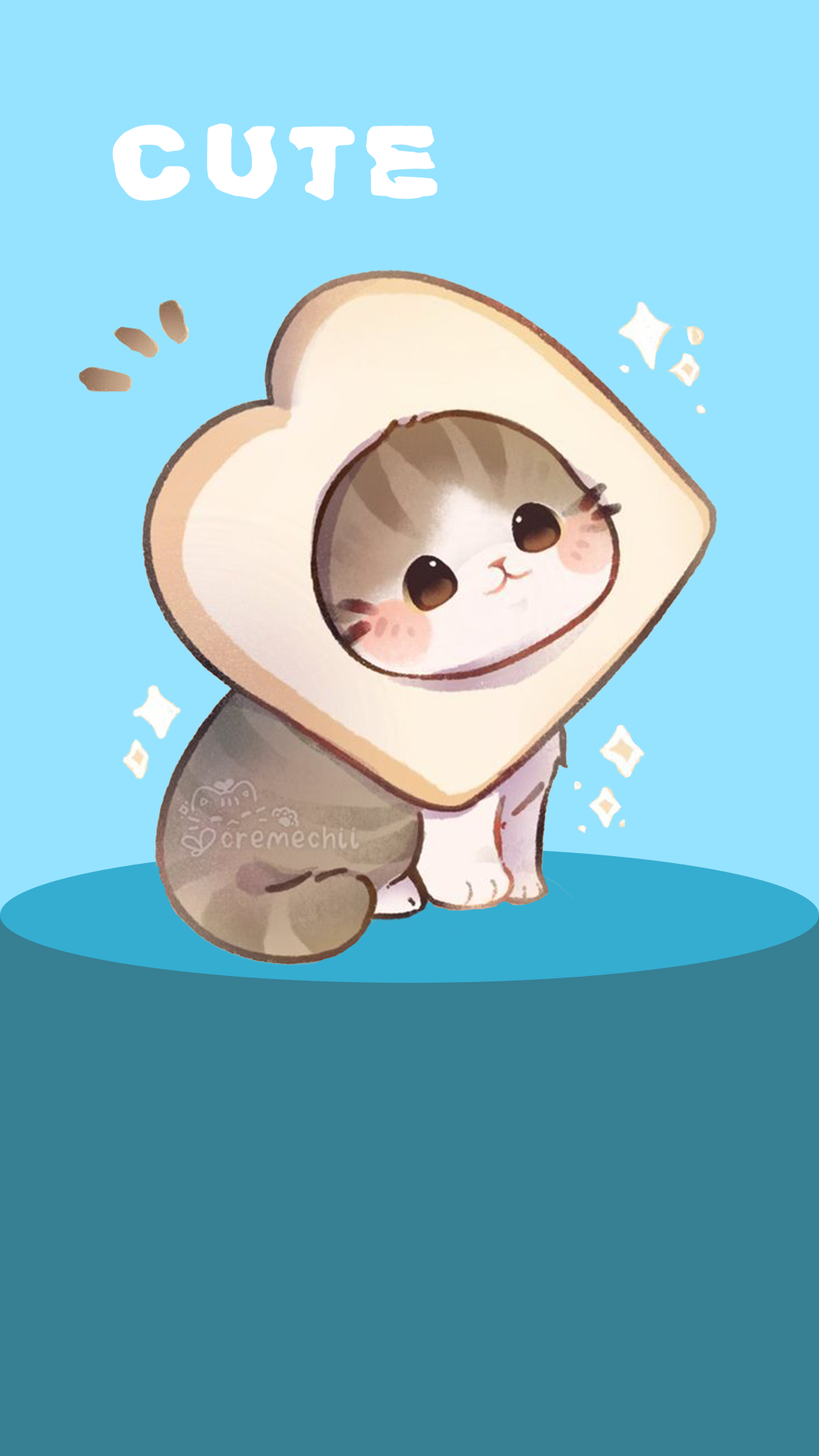
<style>
.page{position:relative;width:819px;height:1456px;background:#96e3ff}
.page>*{position:absolute;margin:0}
.t1{font:99.3px "ASvadekLazy";letter-spacing:0.06em;color:#ffffff;scale:1.05 1}
</style>
<div class="page">
<p class="t1" style="left:112px;top:123px;width:326px;height:78px">CUTE</p>
</div>
